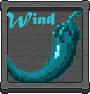
<style>
.page{position:relative;width:90px;height:94px;background:#505050}
.page>*{position:absolute;margin:0}
.t1{font:18px "MaturaMTScriptCapitals";color:#28c8d6}
</style>
<div class="page">
<p class="t1" style="left:6px;top:12px;width:49px;height:16px">Wind</p>
</div>
